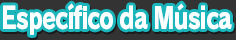
<style>
.page{position:relative;width:236px;height:40px;background:#333333}
.page>*{position:absolute;margin:0}
.t1{font:29.9px "RodinPro-EB";letter-spacing:-0.048em;color:#f9ffff;scale:0.76 1}
</style>
<div class="page">
<p class="t1" style="left:3px;top:3px;width:229px;height:32px">Específico da Música</p>
</div>
